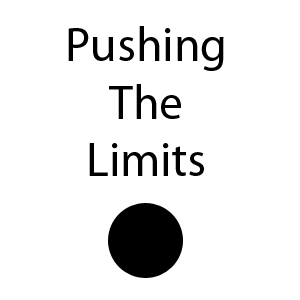
<style>
.page{position:relative;width:300px;height:300px;background:#ffffff}
.page>*{position:absolute;margin:0}
.t1{font:48px "MyriadPro-Regular";color:#000000}
</style>
<div class="page">
<p class="t1" style="left:68px;top:26px;width:156px;height:150px;text-align:center">Pushing<br>The<br>Limits</p>
</div>
